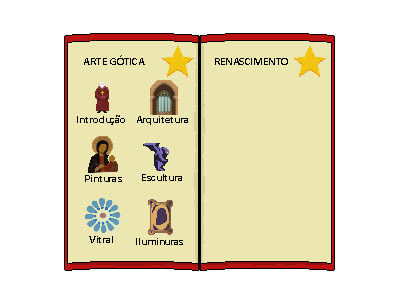
<style>
.page{position:relative;width:400px;height:300px;background:#ffffff}
.page>*{position:absolute;margin:0}
.t1{font:11px "Calibri-Bold";color:#010101}
.t2{font:11px "Calibri-Bold";color:#000000}
</style>
<div class="page">
<p class="t1" style="left:84px;top:55px;width:61px;height:10px">ARTE GÓTICA</p>
<p class="t1" style="left:215px;top:58px;width:73px;height:7px">RENASCIMENTO</p>
<p class="t1" style="left:77px;top:115px;width:48px;height:10px">Introdução</p>
<p class="t1" style="left:137px;top:116px;width:51px;height:9px">Arquitetura</p>
<p class="t1" style="left:142px;top:174px;width:40px;height:7px">Escultura</p>
<p class="t1" style="left:85px;top:175px;width:37px;height:7px">Pinturas</p>
<p class="t2" style="left:89px;top:236px;width:24px;height:7px">Vitral</p>
<p class="t2" style="left:136px;top:238px;width:47px;height:7px">Iluminuras</p>
</div>
